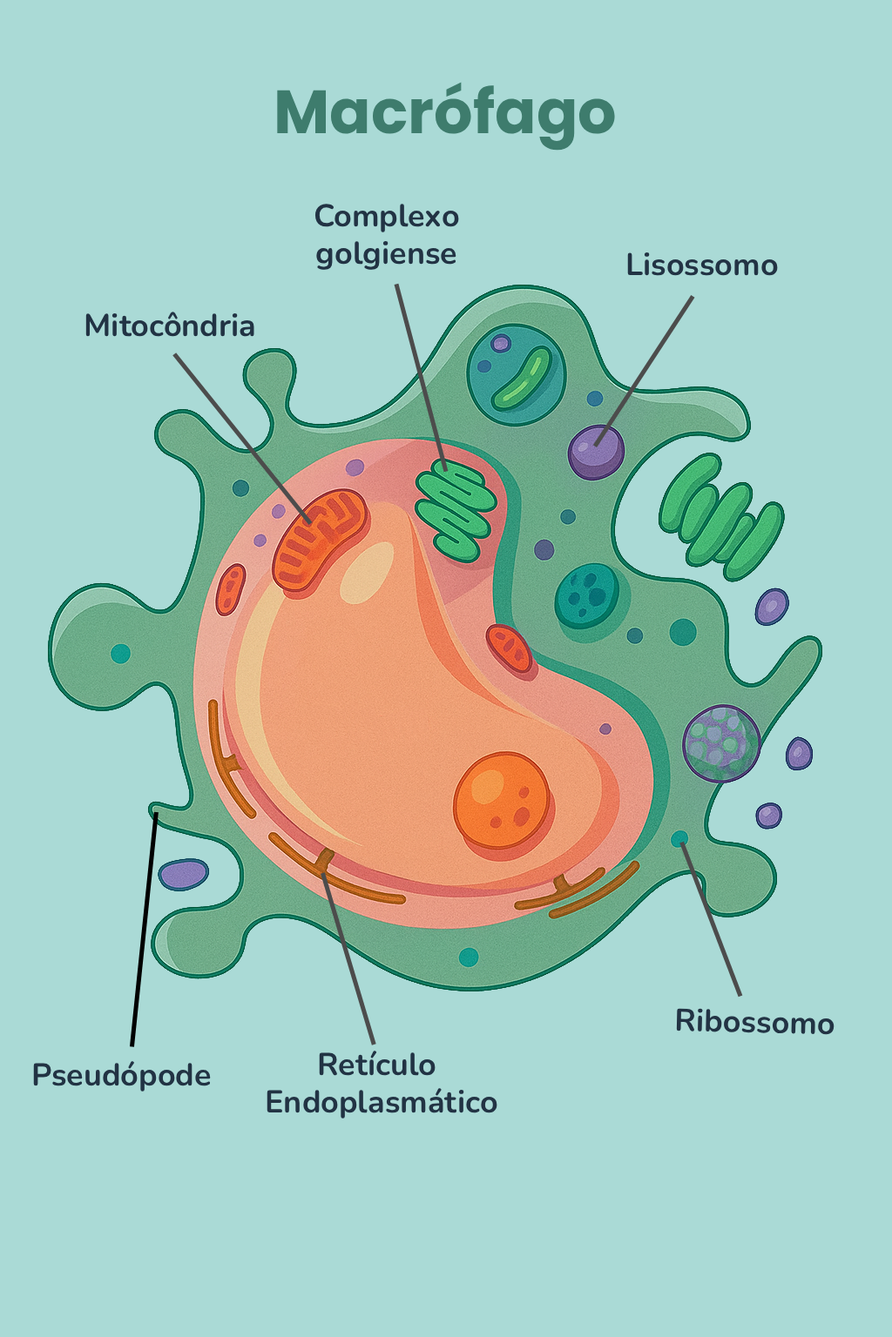
<style>
.page{position:relative;width:892px;height:1337px;background:#aadad6}
.page>*{position:absolute;margin:0}
.t1{font:60.9px "Poppins-Bold";color:#3e7c6d}
.t2{font:31.3px "Nunito-Bold";color:#223344}
</style>
<div class="page">
<p class="t1" style="left:277px;top:82px;width:338px;height:69px">Macrófago</p>
<p class="t2" style="left:314px;top:204px;width:145px;height:66px;text-align:center">Complexo golgiense</p>
<p class="t2" style="left:627px;top:253px;width:151px;height:23px">Lisossomo</p>
<p class="t2" style="left:85px;top:312px;width:169px;height:25px">Mitocôndria</p>
<p class="t2" style="left:676px;top:1008px;width:158px;height:27px;rotate:1deg">Ribossomo</p>
<p class="t2" style="left:33px;top:1061px;width:178px;height:31px">Pseudópode</p>
<p class="t2" style="left:266px;top:1051px;width:231px;height:68px;text-align:center">Retículo Endoplasmático</p>
</div>
